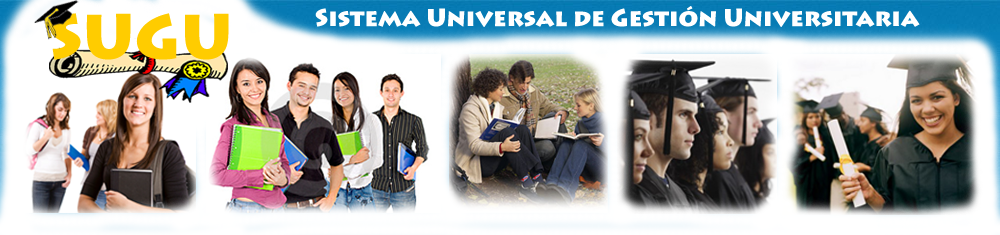
<style>
.page{position:relative;width:1000px;height:235px}
.page>*{position:absolute;margin:0}
.t1{font:24px "LithosPro-Black";color:#ffffff}
.t2{font:61.7px "LithosPro-Black";color:#ffcc00}
</style>
<div class="page">
<p class="t1" style="left:315px;top:6px;width:605px;height:21px">Sistema Universal de Gestión Universitaria</p>
<p class="t2" style="left:50px;top:13px;width:179px;height:47px">SUGU</p>
</div>
